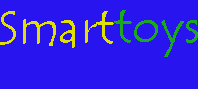
<style>
.page{position:relative;width:198px;height:89px;background:#2814ee}
.page>*{position:absolute;margin:0}
.t1{font:48px "TempusSansITC";color:#e0e005}
.t2{font:48px "TempusSansITC";color:#1ba820}
</style>
<div class="page">
<p class="t1" style="left:0px;top:11px;width:114px;height:37px">Smart</p>
<p class="t2" style="left:114px;top:10px;width:84px;height:47px">toys</p>
</div>
